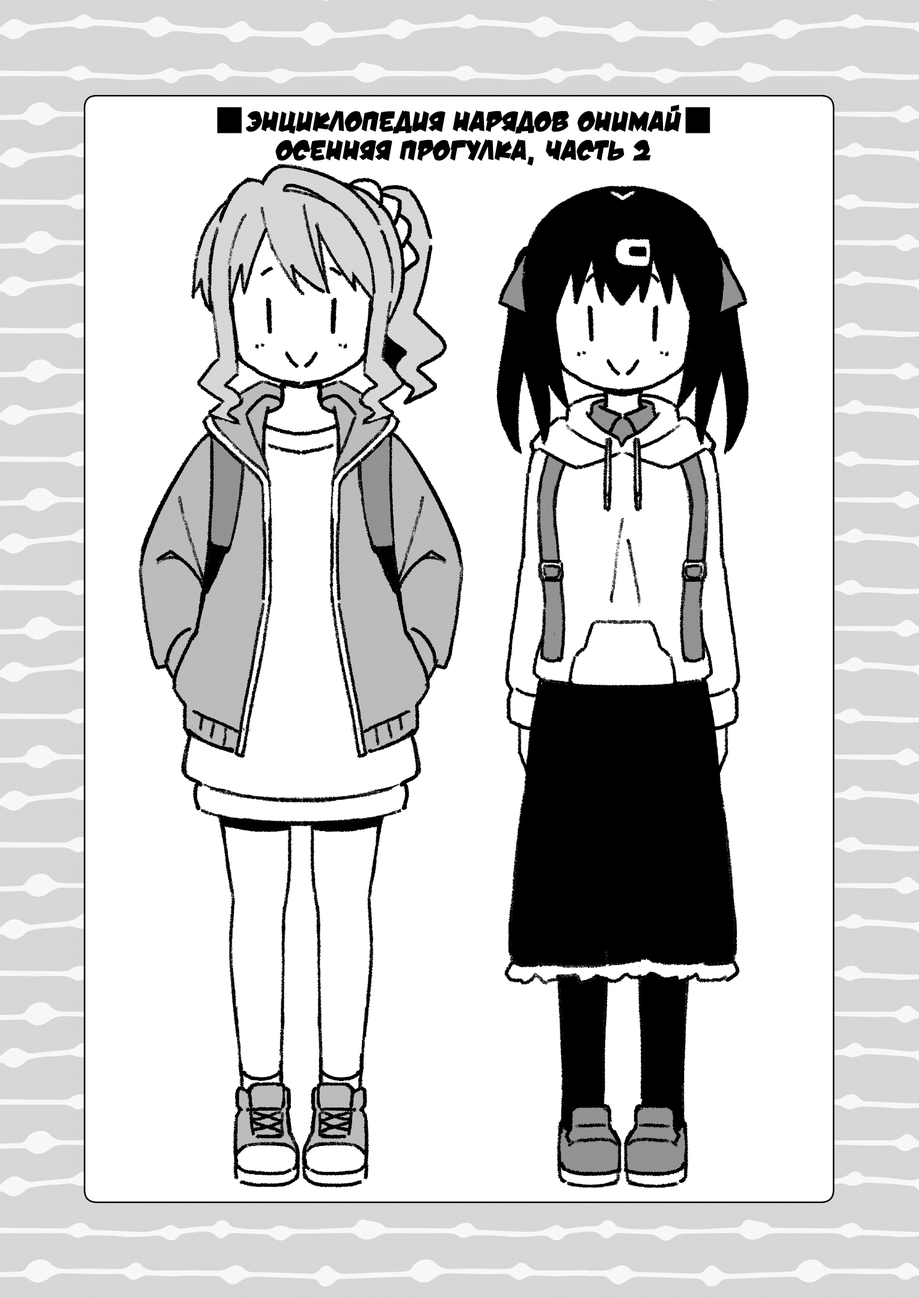
<style>
.page{position:relative;width:919px;height:1298px;background:#ffffff}
.page>*{position:absolute;margin:0}
.t1{font:28.8px "v_DamnNoisyKids";color:#000000;text-transform:uppercase}
</style>
<div class="page">
<p class="t1" style="left:246px;top:105px;width:435px;height:61px;text-align:center">Энциклопедия нарядов Онимай<br>Осенняя прогулка, часть 2</p>
</div>
